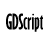
<style>
.page{position:relative;width:48px;height:48px;background:#ffffff}
.page>*{position:absolute;margin:0}
.t1{font:20px "GillSansMT-ExtraCondensedBold";color:#000000}
</style>
<div class="page">
<p class="t1" style="left:6px;top:13px;width:37px;height:19px">GDScript</p>
</div>
